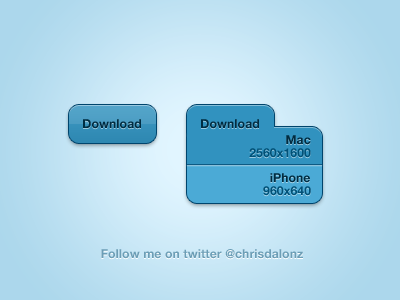
<style>
.page{position:relative;width:400px;height:300px}
.page>*{position:absolute;margin:0}
.t1{font:12.2px "HelveticaNeue-Bold";letter-spacing:0.01em;color:#002c41}
.t2{font:12.2px "HelveticaNeue-Bold";letter-spacing:0.01em;color:#005177}
.t3{font:12.2px "HelveticaNeue-Bold";letter-spacing:0.01em;color:#6c9eb6}
</style>
<div class="page">
<p class="t1" style="left:83px;top:119px;width:58px;height:10px">Download</p>
<p class="t1" style="left:201px;top:119px;width:58px;height:10px">Download</p>
<p class="t1" style="left:286px;top:135px;width:25px;height:10px">Mac</p>
<p class="t2" style="left:249px;top:148px;width:62px;height:10px">2560x1600</p>
<p class="t1" style="left:270px;top:173px;width:40px;height:10px">iPhone</p>
<p class="t2" style="left:263px;top:186px;width:48px;height:10px">960x640</p>
<p class="t3" style="left:101px;top:249px;width:202px;height:10px">Follow me on twitter @chrisdalonz</p>
</div>
